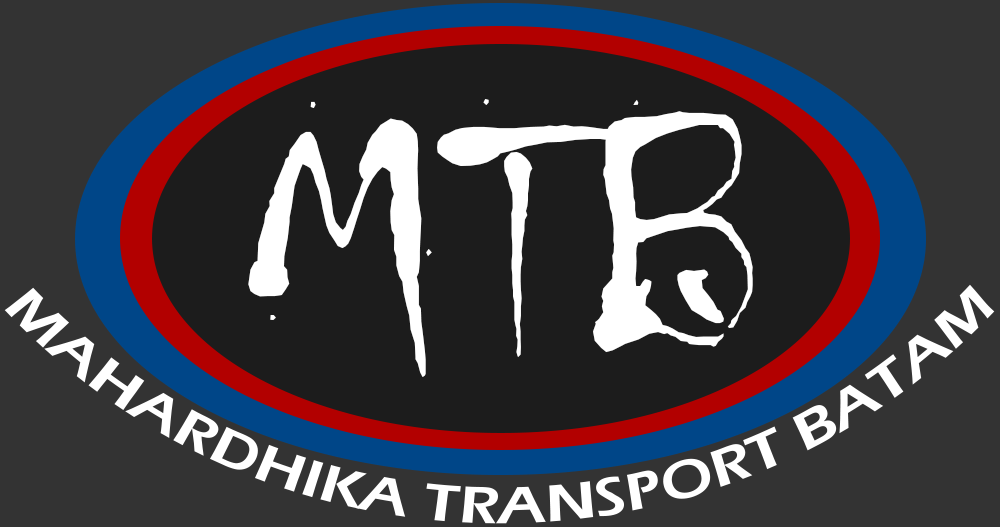
<style>
.page{position:relative;width:1000px;height:527px;background:#333333}
.page>*{position:absolute;margin:0}
.t1{font:355.4px "Chiller-Regular";color:#ffffff}
.t2{font:54.4px "ErasITC-Demi";color:#ffffff}
</style>
<div class="page">
<p class="t1" style="left:248px;top:98px;width:505px;height:279px">MTB</p>
<p class="t2" style="left:4px;top:284px;width:991px;height:240px">MAHARDHIKA TRANSPORT BATAM</p>
</div>
